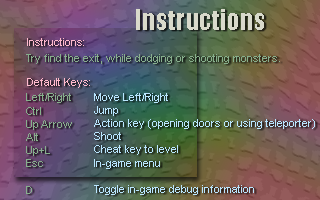
<style>
.page{position:relative;width:320px;height:200px}
.page>*{position:absolute;margin:0}
.t1{font:26px "Impact";color:#d9dacb}
.t2{font:11px "ArialMT";color:#ffbacd}
.t3{font:11px "ArialMT";color:#87af8c}
.t4{font:11px "ArialMT";color:#bae6ff}
</style>
<div class="page">
<p class="t1" style="left:136px;top:9px;width:128px;height:21px">Instructions</p>
<p class="t2" style="left:27px;top:38px;width:63px;height:50px">Instructions:<br><br><br>Default Keys:</p>
<p class="t3" style="left:26px;top:54px;width:254px;height:140px">Try find the exit, while dodging or shooting monsters.<br><br><br>Left/Right<br>Ctrl<br>Up Arrow<br>Alt<br>Up+L<br>Esc<br><br>D</p>
<p class="t4" style="left:94px;top:93px;width:221px;height:102px">Move Left/Right<br>Jump<br>Action key (opening doors or using teleporter)<br>Shoot<br>Cheat key to level<br>In-game menu<br><br>Toggle in-game debug information</p>
</div>
